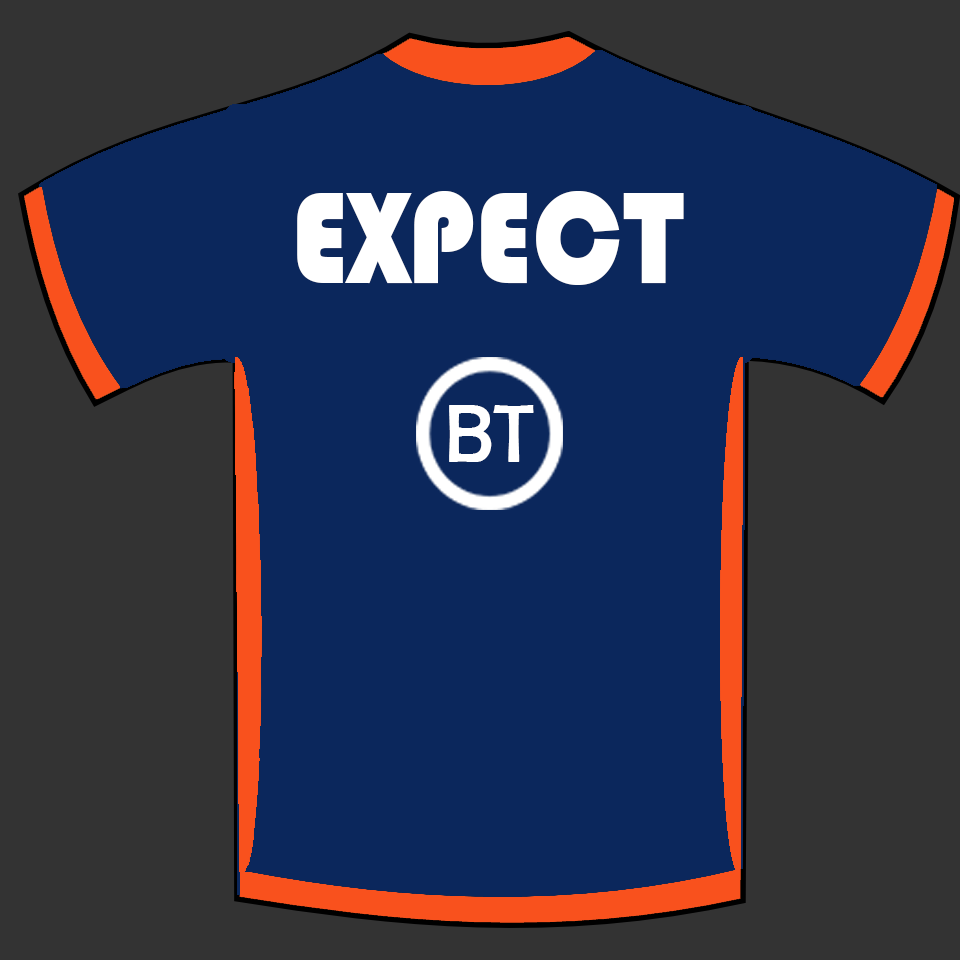
<style>
.page{position:relative;width:960px;height:960px;background:#0b275c}
.page>*{position:absolute;margin:0}
.t1{font:135.4px "Bauhaus93";color:#ffffff;scale:0.88 1}
.t2{font:83.3px "BerlinSansFB-Reg";color:#ffffff;scale:0.96 1}
</style>
<div class="page">
<p class="t1" style="left:297px;top:191px;width:387px;height:94px">EXPECT</p>
<p class="t2" style="left:449px;top:405px;width:85px;height:57px">BT</p>
</div>
